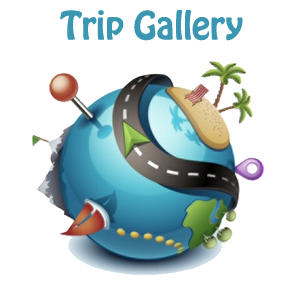
<style>
.page{position:relative;width:300px;height:290px;background:#ffffff}
.page>*{position:absolute;margin:0}
.t1{font:34.5px "HoboStd";color:#3b96b1}
</style>
<div class="page">
<p class="t1" style="left:60px;top:10px;width:183px;height:31px">Trip Gallery</p>
</div>
